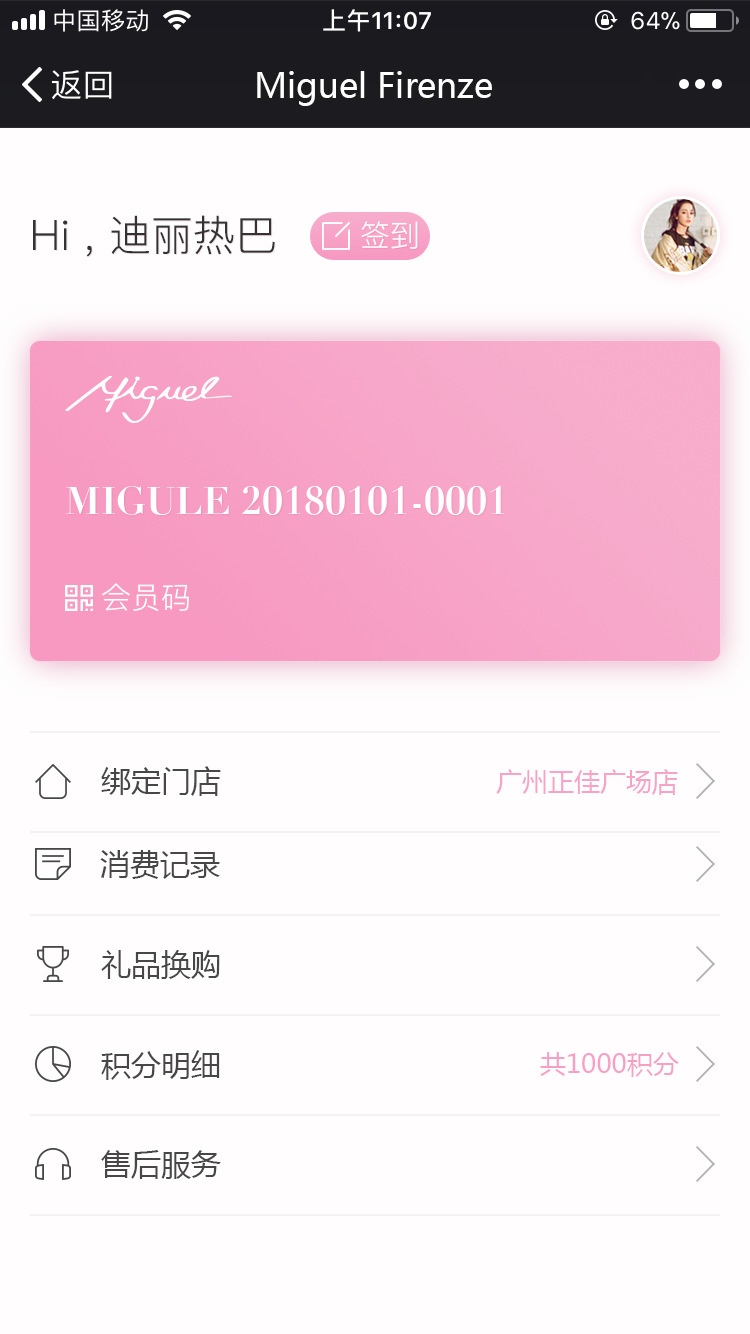
<style>
.page{position:relative;width:750px;height:1334px;background:#fffdfe}
.page>*{position:absolute;margin:0}
.t1{font:34px "MicrosoftYaHei";color:#ffffff}
.t2{font:42px "PingFang-SC-Regular";color:#333333}
.t3{font:30px "PingFang-SC-Regular";color:#fffdfe}
.t4{font:38px "Didot-Bold";color:#ffffff}
.t5{font:30px "PingFang-SC-Regular";color:#ffffff}
.t6{font:30px "MicrosoftYaHei";color:#3f3f40}
.t7{font:26px "MicrosoftYaHei";color:#f7a0c5}
.t8{font:26px "MicrosoftYaHei";color:#f79dc3}
</style>
<div class="page">
<p class="t1" style="left:257px;top:71px;width:235px;height:35px">Miguel Firenze</p>
<p class="t2" style="left:33px;top:215px;width:242px;height:42px">Hi , 迪丽热巴</p>
<p class="t3" style="left:361px;top:221px;width:57px;height:28px">签到</p>
<p class="t4" style="left:66px;top:486px;width:439px;height:29px">MIGULE 20180101-0001</p>
<p class="t5" style="left:102px;top:583px;width:87px;height:28px">会员码</p>
<p class="t6" style="left:101px;top:766px;width:120px;height:30px">绑定门店</p>
<p class="t7" style="left:496px;top:769px;width:182px;height:26px">广州正佳广场店</p>
<p class="t6" style="left:100px;top:850px;width:120px;height:29px">消费记录</p>
<p class="t6" style="left:101px;top:950px;width:119px;height:29px">礼品换购</p>
<p class="t6" style="left:101px;top:1050px;width:119px;height:30px">积分明细</p>
<p class="t8" style="left:540px;top:1052px;width:139px;height:25px">共1000积分</p>
<p class="t6" style="left:101px;top:1150px;width:120px;height:29px">售后服务</p>
</div>
